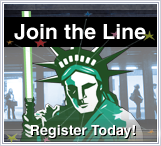
<style>
.page{position:relative;width:161px;height:146px}
.page>*{position:absolute;margin:0}
.t1{font:21px "Helvetica-Bold";letter-spacing:0.01em;color:#ffffff}
.t2{font:14px "Helvetica-Bold";letter-spacing:0.01em;color:#ffffff}
</style>
<div class="page">
<p class="t1" style="left:14px;top:24px;width:132px;height:16px">Join the Line</p>
<p class="t2" style="left:30px;top:125px;width:105px;height:13px">Register Today!</p>
</div>
